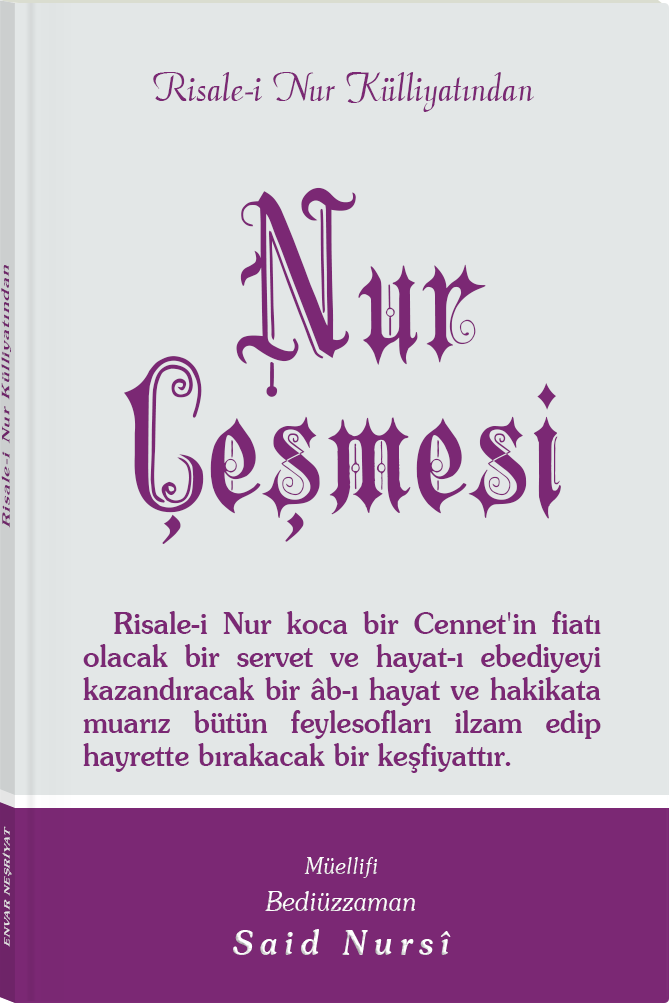
<style>
.page{position:relative;width:669px;height:1003px;background:#e3e7e7}
.page>*{position:absolute;margin:0}
.t1{font:45.3px "Barla © 072 Aria ScriptScriptSSi";color:#7b2874;scale:0.94 1}
.t2{font:216.2px/152.9px "Barla © 001 Liva Nur";letter-spacing:-0.001em;color:#7b2874;scale:0.93 1}
.t3{font:216.2px/192.9px "Barla © 001 Liva Nur";letter-spacing:-0.001em;color:#7b2874;scale:0.93 1}
.t4{font:11.4px "Souvenir-Medium";letter-spacing:0.08em;color:#7b2874;scale:1.65 1}
.t5{font:30.3px/33px "Souvenir-Medium";color:#7b2874;scale:0.92 1}
.t6{font:8.3px "Souvenir-Medium";letter-spacing:0.08em;color:#e5e5e5;scale:1.43 1}
.t7{font:27.1px/37.8px "Souvenir-LightItalic";color:#ffffff;scale:0.92 1}
.t8{font:22.8px/39.8px "Souvenir-LightItalic";color:#ffffff;scale:0.92 1}
.t9{font:33.9px/43.8px "Souvenir-MediumItalic";letter-spacing:0.2em;color:#ffffff;scale:0.92 1}
</style>
<div class="page">
<p class="t1" style="left:153px;top:72px;width:381px;height:40px">Risale-i Nur Külliyatından</p>
<p class="t2" style="left:124px;top:187px;width:437px;height:357px;text-align:center"><span class="t3">Nur<br></span>Çeşmesi</p>
<p class="t4" style="left:1px;top:265px;width:10px;height:263px;rotate:-90deg">Risale-i Nur Külliyatından</p>
<p class="t5" style="left:83px;top:611px;width:518px;height:162px;text-align:justify">Risale-i Nur koca bir Cennet'in fiatı olacak bir servet ve hayat-ı ebediyeyi kazandıracak bir âb-ı hayat ve hakikata muarız bütün feylesofları ilzam edip hayrette bırakacak bir keşfiyattır.</p>
<p class="t6" style="left:2px;top:826px;width:10px;height:121px;rotate:-90deg">ENVAR NEŞRİYAT</p>
<p class="t7" style="left:233px;top:857px;width:218px;height:98px;text-align:center"><span class="t8">Müellifi<br></span>Bediüzzaman<br><span class="t9">Said Nursî</span></p>
</div>
